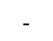
<style>
.page{position:relative;width:53px;height:41px;background:#ffffff}
.page>*{position:absolute;margin:0}
.t1{font:23.7px "DroidSans";color:#000000}
</style>
<div class="page">
<p class="t1" style="left:23px;top:23px;width:6px;height:3px">-</p>
</div>
